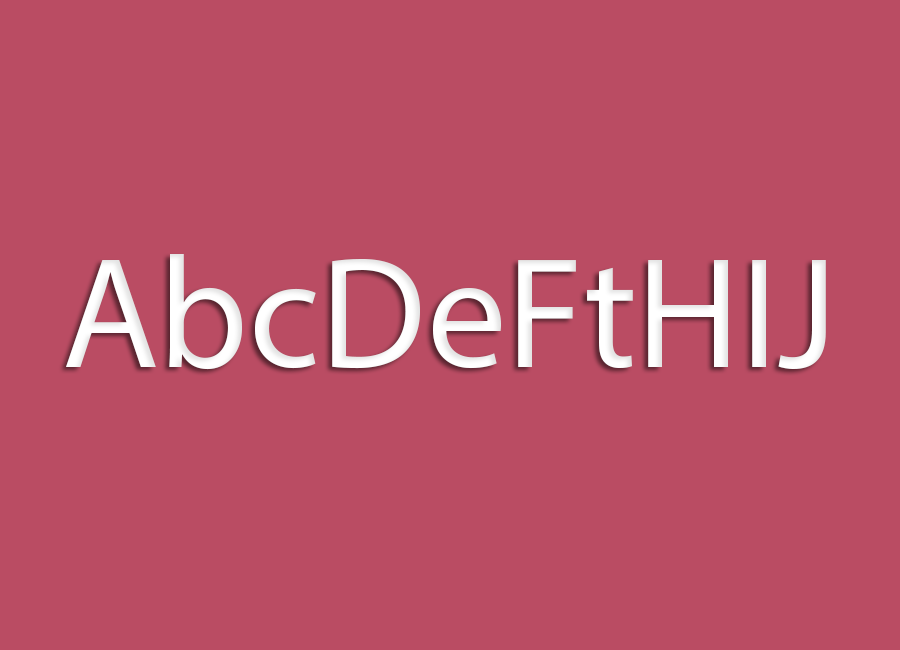
<style>
.page{position:relative;width:900px;height:650px;background:#ba4c63}
.page>*{position:absolute;margin:0}
.t1{font:159px "MyriadPro-Regular";color:#fcfcfc}
</style>
<div class="page">
<p class="t1" style="left:66px;top:254px;width:760px;height:116px">AbcDeFtHIJ</p>
</div>
